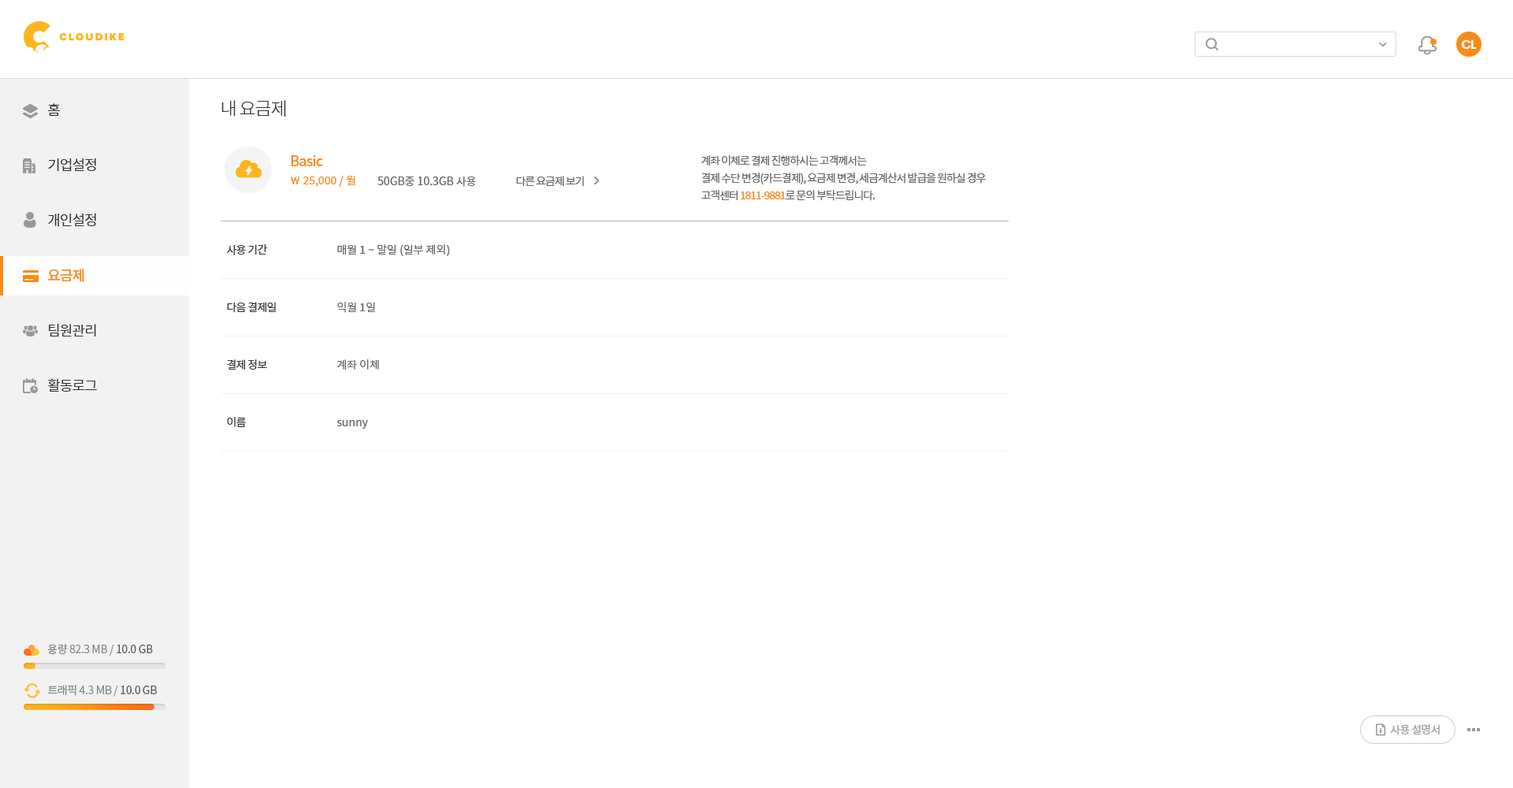
<style>
.page{position:relative;width:1513px;height:788px;background:#ffffff}
.page>*{position:absolute;margin:0}
.t1{font:12.6px "Poppins-SemiBold";letter-spacing:-0.05em;color:#ffffff}
.t2{font:18.1px "NotoSansCJKkr-Light";letter-spacing:-0.05em;color:#333333}
.t3{font:14.2px/55.2px "NotoSansCJKkr-DemiLight";letter-spacing:-0.05em;color:#333333}
.t4{font:14.2px/55.2px "NotoSansCJKkr-Medium";letter-spacing:-0.05em;color:#f98a17}
.t5{font:14.2px "NotoSansCJKkr-Medium";letter-spacing:-0.05em;color:#f98a17}
.t6{font:11px/17.3px "NotoSansCJKkr-Regular";letter-spacing:-0.075em;color:#666666}
.t7{font:11px/17.3px "NotoSansCJKkr-Regular";letter-spacing:-0.075em;color:#f98a17}
.t8{font:11px "NotoSansCJKkr-Regular";color:#f98a17}
.t9{font:11px "NotoSansCJKkr-Regular";color:#666666}
.t10{font:11px "NotoSansCJKkr-Regular";letter-spacing:-0.075em;color:#666666}
.t11{font:11px "NotoSansCJKkr-Regular";letter-spacing:-0.05em;color:#333333}
.t12{font:11px "NotoSansCJKkr-Regular";letter-spacing:-0.025em;color:#888888}
.t13{font:11px "NotoSansCJKkr-Regular";letter-spacing:-0.025em;color:#585858}
.t14{font:11px "NotoSansCJKkr-Regular";letter-spacing:-0.05em;color:#999999}
</style>
<div class="page">
<p class="t1" style="left:1461px;top:39px;width:16px;height:10px">CL</p>
<p class="t2" style="left:221px;top:100px;width:65px;height:17px">내 요금제</p>
<p class="t3" style="left:47px;top:103px;width:50px;height:289px">홈<br>기업설정<br>개인설정<br><span class="t4">요금제<br></span>팀원관리<br>활동로그</p>
<p class="t5" style="left:291px;top:155px;width:32px;height:11px">Basic</p>
<p class="t6" style="left:701px;top:155px;width:285px;height:46px">계좌 이체로 결제 진행하시는 고객께서는<br>결제 수단 변경(카드결제), 요금제 변경, 세금계산서 발급을 원하실 경우<br>고객센터 <span class="t7">1811-9881</span>로 문의 부탁드립니다.</p>
<p class="t8" style="left:290px;top:175px;width:65px;height:12px">￦ 25,000 / 월</p>
<p class="t9" style="left:377px;top:177px;width:99px;height:10px">50GB중 10.3GB 사용</p>
<p class="t10" style="left:516px;top:176px;width:68px;height:11px">다른 요금제 보기</p>
<p class="t11" style="left:227px;top:244px;width:40px;height:11px">사용 기간</p>
<p class="t9" style="left:337px;top:244px;width:113px;height:12px">매월 1 ~ 말일 (일부 제외)</p>
<p class="t11" style="left:227px;top:302px;width:49px;height:11px">다음 결제일</p>
<p class="t9" style="left:337px;top:302px;width:38px;height:11px">익월 1일</p>
<p class="t11" style="left:227px;top:359px;width:40px;height:11px">결제 정보</p>
<p class="t9" style="left:337px;top:359px;width:42px;height:11px">계좌 이체</p>
<p class="t11" style="left:227px;top:417px;width:19px;height:10px">이름</p>
<p class="t9" style="left:337px;top:420px;width:31px;height:9px">sunny</p>
<p class="t12" style="left:47px;top:644px;width:106px;height:12px">용량 82.3 MB / <span class="t13">10.0 GB</span></p>
<p class="t12" style="left:48px;top:685px;width:109px;height:12px">트래픽 4.3 MB / <span class="t13">10.0 GB</span></p>
<p class="t14" style="left:1390px;top:724px;width:50px;height:11px">사용 설명서</p>
</div>
